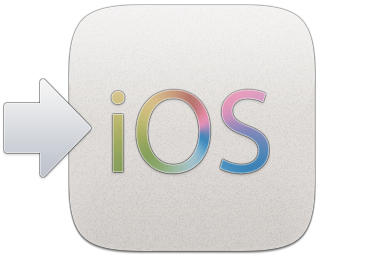
<style>
.page{position:relative;width:380px;height:256px;background:#ffffff}
.page>*{position:absolute;margin:0}
.t1{font:120px "MyriadPro-Regular"}
</style>
<div class="page">
<p class="t1" style="left:111px;top:89px;width:158px;height:85px">iOS</p>
</div>
